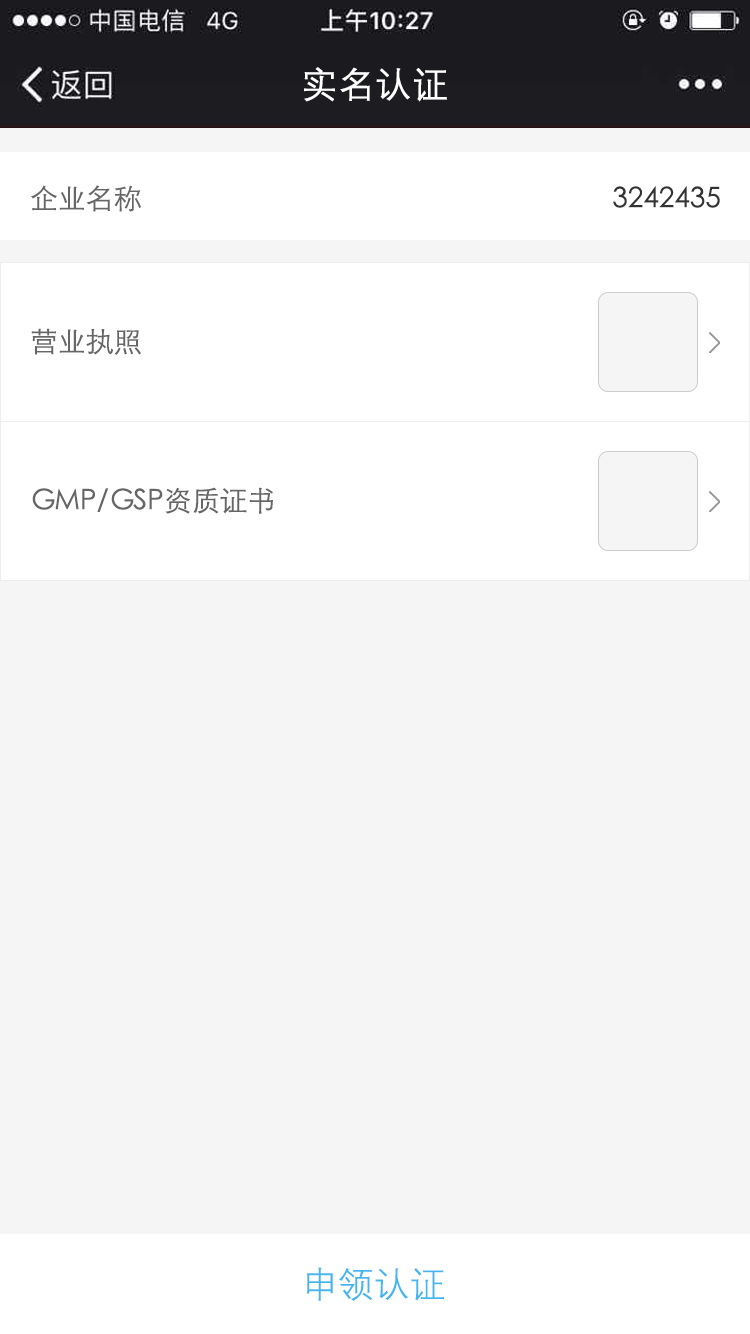
<style>
.page{position:relative;width:750px;height:1334px;background:#f5f5f5}
.page>*{position:absolute;margin:0}
.t1{font:36px "FZZDXJW--GB1-0";color:#ffffff;font-weight:bold}
.t2{font:28px "STXihei";color:#666666}
.t3{font:28px "STXihei";color:#333333}
.t4{font:36px "FZZDXJW--GB1-0";color:#43b6f2}
</style>
<div class="page">
<p class="t1" style="left:304px;top:67px;width:143px;height:35px">实名认证</p>
<p class="t2" style="left:30px;top:185px;width:111px;height:27px">企业名称</p>
<p class="t3" style="left:613px;top:186px;width:107px;height:22px">3242435</p>
<p class="t2" style="left:31px;top:328px;width:110px;height:27px">营业执照</p>
<p class="t2" style="left:32px;top:487px;width:241px;height:27px">GMP/GSP资质证书</p>
<p class="t4" style="left:307px;top:1267px;width:137px;height:34px">申领认证</p>
</div>
